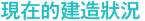
<style>
.page{position:relative;width:145px;height:21px;background:#ffffff}
.page>*{position:absolute;margin:0}
.t1{font:20px "GothicMB101Pr6N-Medium";color:#1fbec0}
</style>
<div class="page">
<p class="t1" style="left:1px;top:1px;width:139px;height:19px">現在的建造狀況</p>
</div>
